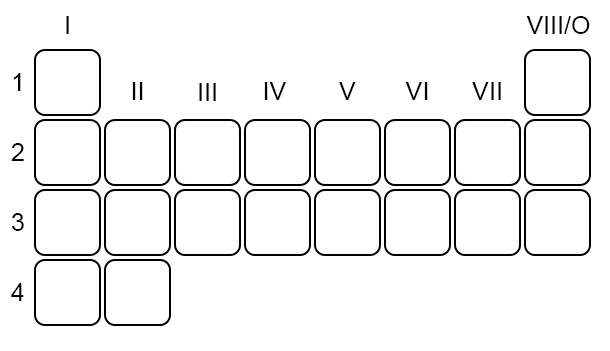
<style>
.page{position:relative;width:610px;height:351px;background:#ffffff}
.page>*{position:absolute;margin:0}
.t1{font:25px "ArialMT";color:#000000}
</style>
<div class="page">
<p class="t1" style="left:66px;top:16px;width:3px;height:18px">I</p>
<p class="t1" style="left:526px;top:16px;width:64px;height:18px">VIII/O</p>
<p class="t1" style="left:13px;top:73px;width:8px;height:18px">1</p>
<p class="t1" style="left:132px;top:82px;width:11px;height:18px">II</p>
<p class="t1" style="left:199px;top:83px;width:17px;height:18px">III</p>
<p class="t1" style="left:264px;top:82px;width:22px;height:18px">IV</p>
<p class="t1" style="left:339px;top:82px;width:17px;height:18px">V</p>
<p class="t1" style="left:405px;top:82px;width:23px;height:18px">VI</p>
<p class="t1" style="left:472px;top:82px;width:29px;height:18px">VII</p>
<p class="t1" style="left:11px;top:143px;width:13px;height:18px">2</p>
<p class="t1" style="left:12px;top:213px;width:12px;height:18px">3</p>
<p class="t1" style="left:11px;top:283px;width:13px;height:18px">4</p>
</div>
